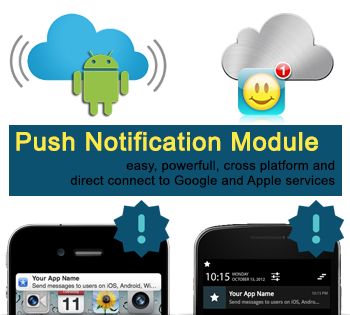
<style>
.page{position:relative;width:350px;height:315px;background:#ffffff}
.page>*{position:absolute;margin:0}
.t1{font:25px "ArialMT";letter-spacing:0.02em;color:#fde944;font-weight:bold}
.t2{font:13px/15px "ArialMT";letter-spacing:0.02em;color:#000000}
</style>
<div class="page">
<p class="t1" style="left:16px;top:131px;width:302px;height:20px">Push Notification Module</p>
<p class="t2" style="left:70px;top:160px;width:265px;height:28px;text-align:right">easy, powerfull, cross platform and<br>direct connect to Google and Apple services</p>
</div>
